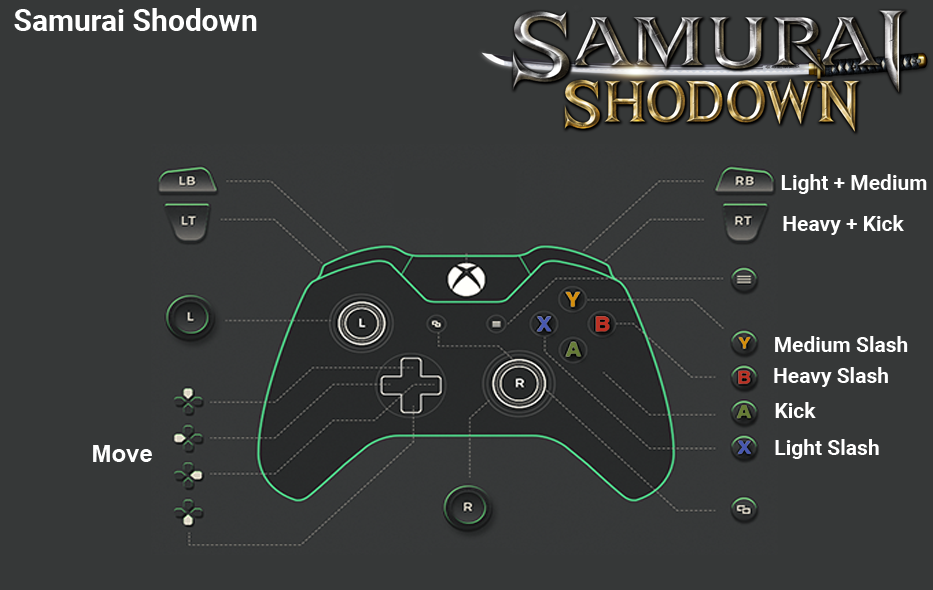
<style>
.page{position:relative;width:933px;height:590px;background:#363838}
.page>*{position:absolute;margin:0}
.t1{font:30px "Roboto-Bold";color:#ffffff}
.t2{font:21px "Roboto-Bold";color:#ffffff}
.t3{font:24px "Arial-BoldMT";color:#fefefe}
</style>
<div class="page">
<p class="t1" style="left:14px;top:8px;width:243px;height:23px">Samurai Shodown</p>
<p class="t2" style="left:781px;top:174px;width:146px;height:20px">Light + Medium</p>
<p class="t2" style="left:783px;top:215px;width:121px;height:20px">Heavy + Kick</p>
<p class="t2" style="left:775px;top:336px;width:133px;height:16px">Medium Slash</p>
<p class="t2" style="left:774px;top:367px;width:114px;height:20px">Heavy Slash</p>
<p class="t2" style="left:775px;top:402px;width:41px;height:16px">Kick</p>
<p class="t3" style="left:93px;top:445px;width:59px;height:17px">Move</p>
<p class="t2" style="left:775px;top:439px;width:104px;height:20px">Light Slash</p>
</div>
